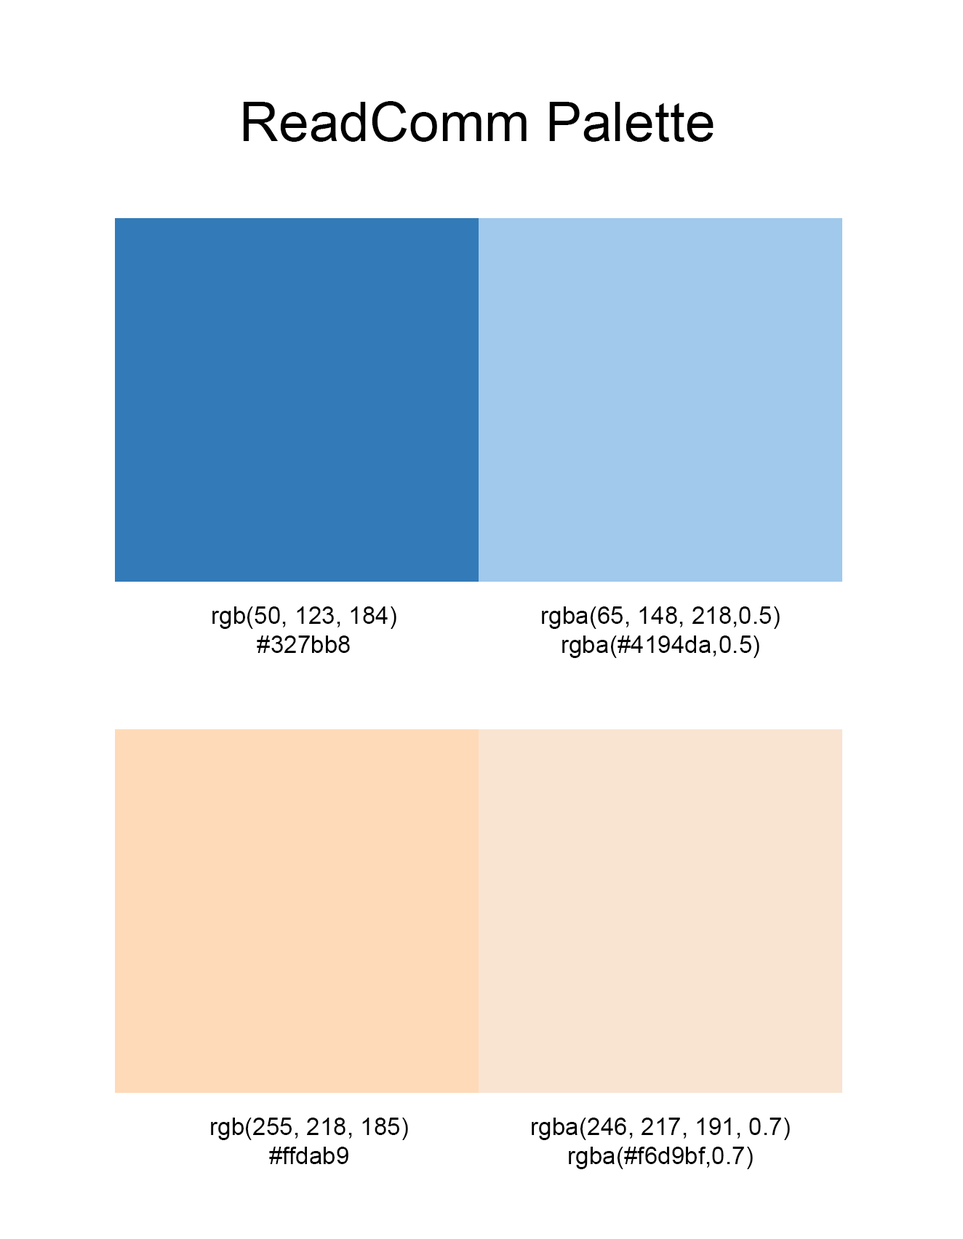
<style>
.page{position:relative;width:963px;height:1239px;background:#ffffff}
.page>*{position:absolute;margin:0}
.t1{font:54.5px "ArialMT";color:#000000}
.t2{font:24.2px "ArialMT";color:#000000}
</style>
<div class="page">
<p class="t1" style="left:243px;top:101px;width:470px;height:41px">ReadComm Palette</p>
<p class="t2" style="left:212px;top:606px;width:184px;height:47px;text-align:center">rgb(50, 123, 184)<br>#327bb8</p>
<p class="t2" style="left:542px;top:606px;width:237px;height:52px;text-align:center">rgba(65, 148, 218,0.5)<br>rgba(#4194da,0.5)</p>
<p class="t2" style="left:211px;top:1117px;width:197px;height:47px;text-align:center">rgb(255, 218, 185)<br>#ffdab9</p>
<p class="t2" style="left:531px;top:1117px;width:259px;height:52px;text-align:center">rgba(246, 217, 191, 0.7)<br>rgba(#f6d9bf,0.7)</p>
</div>
